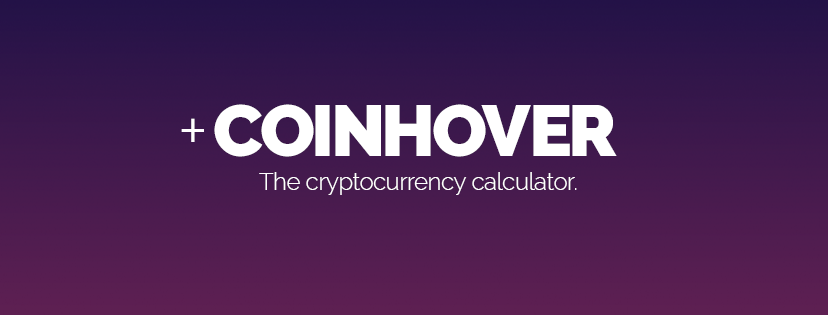
<style>
.page{position:relative;width:828px;height:315px}
.page>*{position:absolute;margin:0}
.t1{font:72px "Raleway-Black";letter-spacing:-0.02em;color:#ffffff}
.t2{font:72px "Raleway-Light";letter-spacing:-0.02em;color:#ffffff}
.t3{font:24px "Raleway-Light";letter-spacing:-0.02em;color:#ffffff}
</style>
<div class="page">
<p class="t1" style="left:214px;top:104px;width:403px;height:53px">COINHOVER</p>
<p class="t2" style="left:181px;top:118px;width:23px;height:24px">+</p>
<p class="t3" style="left:259px;top:172px;width:318px;height:23px">The cryptocurrency calculator.</p>
</div>
